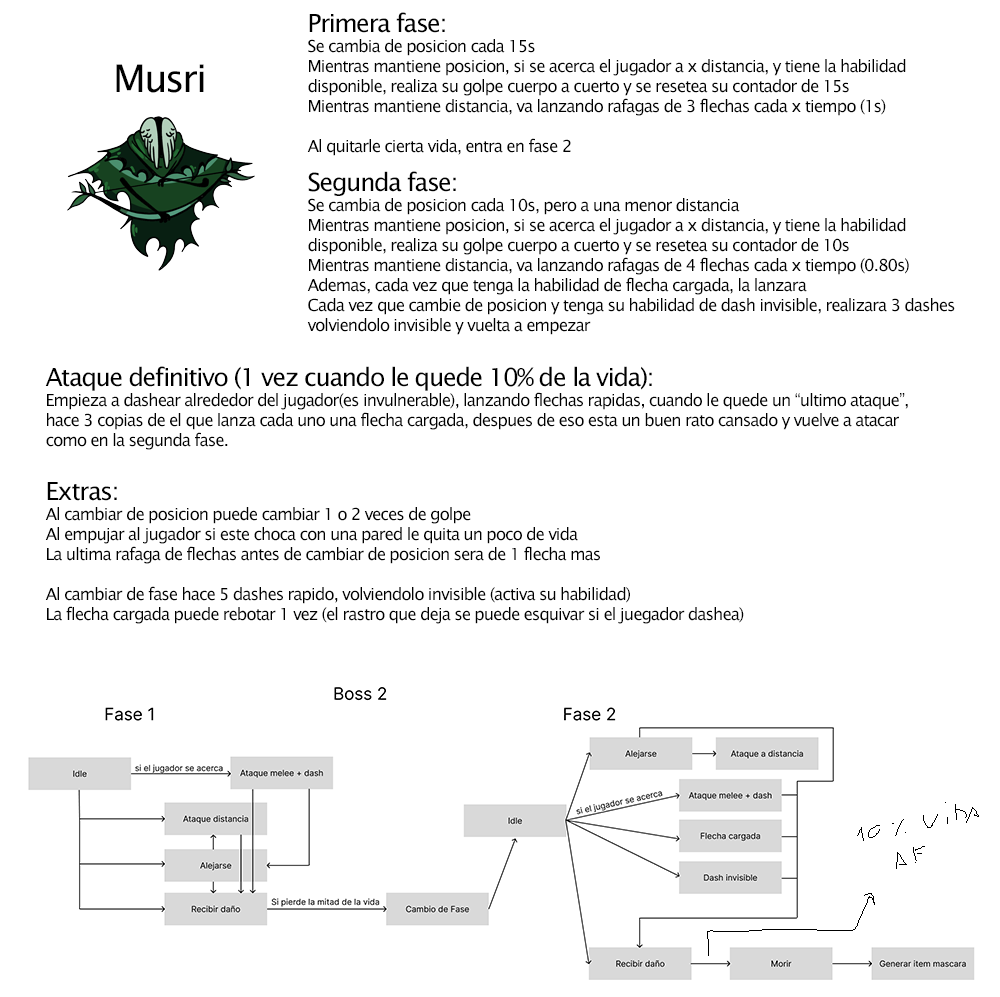
<style>
.page{position:relative;width:1000px;height:997px;background:#ffffff}
.page>*{position:absolute;margin:0}
.t1{font:16.7px "LucidaSansUnicode";letter-spacing:-0.06em;color:#000000}
.t2{font:25px "LucidaSansUnicode";letter-spacing:-0.06em;color:#000000}
.t3{font:38px "LucidaSansUnicode";letter-spacing:-0.06em;color:#000000}
</style>
<div class="page">
<p class="t1" style="left:307px;top:12px;width:599px;height:144px"><span class="t2">Primera fase:<br></span>Se cambia de posicion cada 15s<br>Mientras mantiene posicion, si se acerca el jugador a x distancia, y tiene la habilidad<br>disponible, realiza su golpe cuerpo a cuerto y se resetea su contador de 15s<br>Mientras mantiene distancia, va lanzando rafagas de 3 flechas cada x tiempo (1s)<br><br>Al quitarle cierta vida, entra en fase 2</p>
<p class="t3" style="left:116px;top:64px;width:88px;height:29px">Musri</p>
<p class="t1" style="left:307px;top:171px;width:648px;height:164px"><span class="t2">Segunda fase:<br></span>Se cambia de posicion cada 10s, pero a una menor distancia<br>Mientras mantiene posicion, si se acerca el jugador a x distancia, y tiene la habilidad<br>disponible, realiza su golpe cuerpo a cuerto y se resetea su contador de 10s<br>Mientras mantiene distancia, va lanzando rafagas de 4 flechas cada x tiempo (0.80s)<br>Ademas, cada vez que tenga la habilidad de flecha cargada, la lanzara<br>Cada vez que cambie de posicion y tenga su habilidad de dash invisible, realizara 3 dashes<br>volviendolo invisible y vuelta a empezar</p>
<p class="t1" style="left:45px;top:366px;width:863px;height:84px"><span class="t2">Ataque definitivo (1 vez cuando le quede 10% de la vida):<br></span>Empieza a dashear alrededor del jugador(es invulnerable), lanzando flechas rapidas, cuando le quede un “ultimo ataque”, <br>hace 3 copias de el que lanza cada uno una flecha cargada, despues de eso esta un buen rato cansado y vuelve a atacar <br>como en la segunda fase.</p>
<p class="t1" style="left:45px;top:482px;width:699px;height:142px"><span class="t2">Extras:<br></span>Al cambiar de posicion puede cambiar 1 o 2 veces de golpe<br>Al empujar al jugador si este choca con una pared le quita un poco de vida<br>La ultima rafaga de flechas antes de cambiar de posicion sera de 1 flecha mas<br><br>Al cambiar de fase hace 5 dashes rapido, volviendolo invisible (activa su habilidad)<br>La flecha cargada puede rebotar 1 vez (el rastro que deja se puede esquivar si el juegador dashea)</p>
</div>
